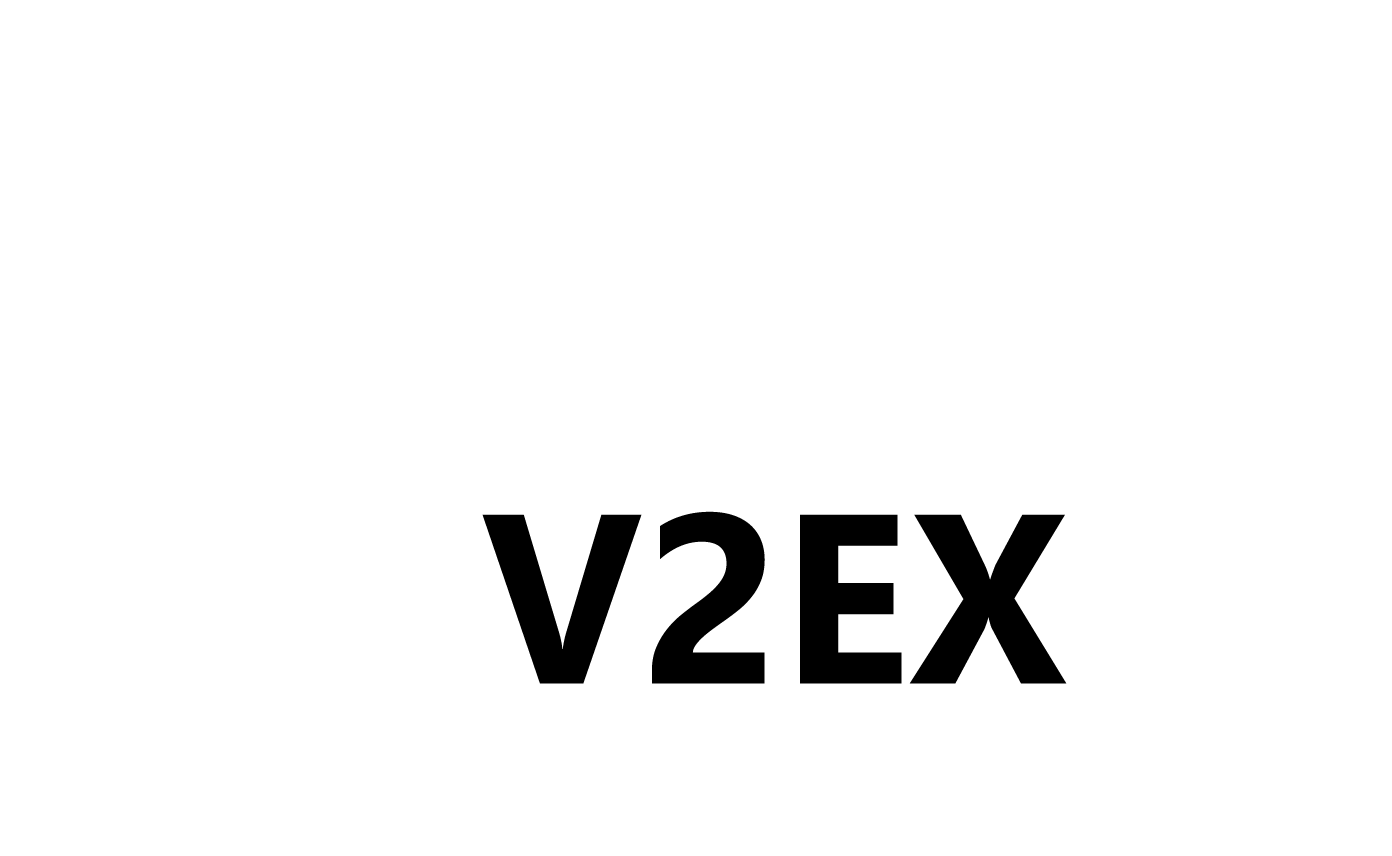
<style>
.page{position:relative;width:1392px;height:856px;background:#ffffff}
.page>*{position:absolute;margin:0}
.t1{font:241px "NirmalaUI-Bold";color:#000000}
</style>
<div class="page">
<p class="t1" style="left:482px;top:511px;width:585px;height:173px">V2EX</p>
</div>
